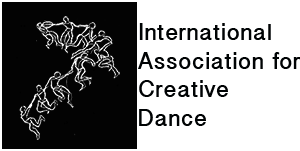
<style>
.page{position:relative;width:300px;height:151px;background:#ffffff}
.page>*{position:absolute;margin:0}
.t1{font:23.7px "MalayalamSangamMN-Bold";letter-spacing:0.025em;color:#000304}
</style>
<div class="page">
<p class="t1" style="left:138px;top:23px;width:162px;height:103px">International<br>Association for <br>Creative <br>Dance</p>
</div>
